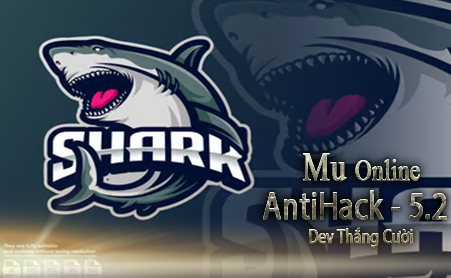
<style>
.page{position:relative;width:451px;height:278px}
.page>*{position:absolute;margin:0}
.t1{font:30px "TimesNewRomanPSMT";font-weight:bold;scale:0.76 1}
.t2{font:40px "TimesNewRomanPSMT";font-weight:bold;scale:0.76 1}
.t3{font:40px "MyriadPro-Regular";font-weight:bold;scale:0.76 1}
.t4{font:20px "MyriadPro-Regular";font-weight:bold;scale:0.76 1}
</style>
<div class="page">
<p class="t1" style="left:303px;top:153px;width:117px;height:28px"><span class="t2">Mu </span>Online</p>
<p class="t3" style="left:263px;top:190px;width:184px;height:30px">AntiHack - 5.2</p>
<p class="t4" style="left:309px;top:227px;width:104px;height:21px">Dev Thắng Cười</p>
</div>
